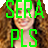
<style>
.page{position:relative;width:48px;height:48px;background:#10ff04}
.page>*{position:absolute;margin:0}
.t1{font:24px "AgencyFB-Reg";color:#10ff04}
</style>
<div class="page">
<p class="t1" style="left:6px;top:0px;width:38px;height:47px;text-align:center">SERA<br>PLS</p>
</div>
